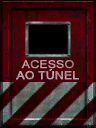
<style>
.page{position:relative;width:96px;height:128px}
.page>*{position:absolute;margin:0}
.t1{font:11px "ArialMT";color:#b1a1a3;font-weight:bold;scale:1.1 1}
.t2{font:11px "ArialMT";color:#af9ea0;font-weight:bold;scale:1.1 1}
</style>
<div class="page">
<p class="t1" style="left:21px;top:60px;width:53px;height:9px">ACESSO</p>
<p class="t2" style="left:16px;top:69px;width:63px;height:11px">AO TÚNEL</p>
</div>
